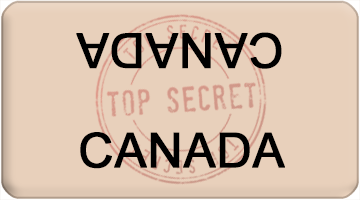
<style>
.page{position:relative;width:360px;height:200px;background:#e8d0bb}
.page>*{position:absolute;margin:0}
.t1{font:48px "ArialMT";color:#000000;font-weight:bold}
</style>
<div class="page">
<p class="t1" style="left:76px;top:32px;width:206px;height:37px;rotate:180deg">CANADA</p>
<p class="t1" style="left:80px;top:132px;width:205px;height:37px">CANADA</p>
</div>
